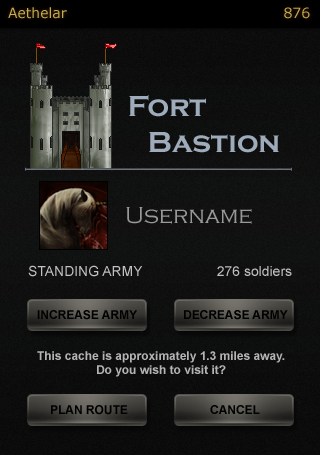
<style>
.page{position:relative;width:320px;height:455px}
.page>*{position:absolute;margin:0}
.t1{font:29.9px "CopperplateGothic-Bold";color:#9eabbb}
.t2{font:23.9px "CopperplateGothic-Light";color:#989898}
.t3{font:13.9px "ArialMT";color:#c1c1c1}
.t4{font:12px "Arial-BoldMT";color:#000000}
.t5{font:12px "Arial-BoldMT";color:#b4b4b4}
</style>
<div class="page">
<p class="t1" style="left:129px;top:95px;width:150px;height:58px;text-align:right">Fort <br>Bastion</p>
<p class="t2" style="left:126px;top:207px;width:126px;height:17px">Username</p>
<p class="t3" style="left:28px;top:265px;width:115px;height:12px">STANDING ARMY</p>
<p class="t3" style="left:217px;top:266px;width:75px;height:10px">276 soldiers</p>
<p class="t4" style="left:37px;top:310px;width:100px;height:10px">INCREASE ARMY</p>
<p class="t4" style="left:184px;top:310px;width:104px;height:10px">DECREASE ARMY</p>
<p class="t5" style="left:37px;top:351px;width:248px;height:26px;text-align:center">This cache is approximately 1.3 miles away.<br>Do you wish to visit it?</p>
<p class="t4" style="left:51px;top:405px;width:77px;height:10px">PLAN ROUTE</p>
<p class="t4" style="left:210px;top:405px;width:50px;height:9px">CANCEL</p>
</div>
